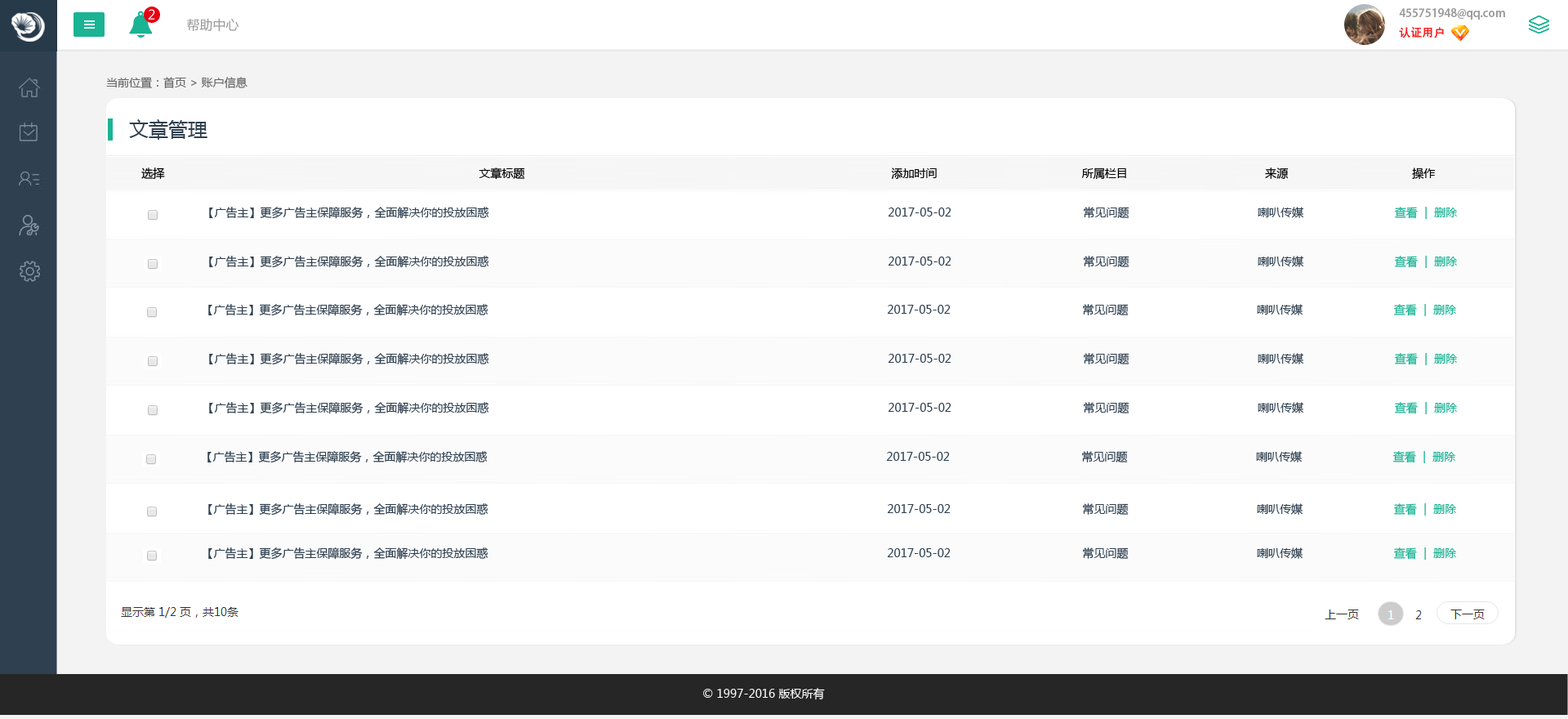
<style>
.page{position:relative;width:1568px;height:719px;background:#ffffff}
.page>*{position:absolute;margin:0}
.t1{font:13.1px "MicrosoftYaHei";color:#ffffff}
.t2{font:13.1px "MicrosoftYaHei";color:#999999}
.t3{font:11.4px/19.6px "AdobeHeitiStd-Regular";color:#999999}
.t4{font:11.4px/19.6px "AdobeHeitiStd-Regular";color:#f61e1e}
.t5{font:11.4px/19.6px "AdobeHeitiStd-Regular";color:#ffffff}
.t6{font:11.4px "MicrosoftYaHei";color:#666666}
.t7{font:19.6px "MicrosoftYaHei";color:#2f4050}
.t8{font:11.4px "MicrosoftYaHei";color:#000000}
.t9{font:11.4px "MicrosoftYaHei";color:#2f4050}
.t10{font:11.4px "MicrosoftYaHei";color:#1ab394}
.t11{font:11.4px "MicrosoftYaHei";color:#ffffff}
</style>
<div class="page">
<p class="t1" style="left:148px;top:9px;width:7px;height:11px">2</p>
<p class="t2" style="left:187px;top:18px;width:52px;height:14px">帮助中心</p>
<p class="t3" style="left:1399px;top:8px;width:106px;height:30px">455751948@qq.com<br><span class="t4">认证用户               </span><span class="t5">退出</span></p>
<p class="t6" style="left:106px;top:77px;width:141px;height:11px">当前位置：首页 &gt; 账户信息</p>
<p class="t7" style="left:129px;top:119px;width:78px;height:21px">文章管理</p>
<p class="t8" style="left:141px;top:167px;width:1295px;height:13px">选择                                                                                             文章标题                                                                                                      添加时间                                  所属栏目                               来源                                 操作</p>
<p class="t9" style="left:209px;top:207px;width:1249px;height:12px">【广告主】更多广告主保障服务，全面解决你的投放困惑                                                                                                                      2017-05-02                                       常见问题                                      喇叭传媒                           <span class="t10">查看  |  删除</span></p>
<p class="t9" style="left:209px;top:256px;width:1249px;height:12px">【广告主】更多广告主保障服务，全面解决你的投放困惑                                                                                                                      2017-05-02                                       常见问题                                      喇叭传媒                           <span class="t10">查看  |  删除</span></p>
<p class="t9" style="left:208px;top:304px;width:1249px;height:12px">【广告主】更多广告主保障服务，全面解决你的投放困惑                                                                                                                      2017-05-02                                       常见问题                                      喇叭传媒                           <span class="t10">查看  |  删除</span></p>
<p class="t9" style="left:209px;top:353px;width:1249px;height:12px">【广告主】更多广告主保障服务，全面解决你的投放困惑                                                                                                                      2017-05-02                                       常见问题                                      喇叭传媒                           <span class="t10">查看  |  删除</span></p>
<p class="t9" style="left:209px;top:402px;width:1249px;height:12px">【广告主】更多广告主保障服务，全面解决你的投放困惑                                                                                                                      2017-05-02                                       常见问题                                      喇叭传媒                           <span class="t10">查看  |  删除</span></p>
<p class="t9" style="left:207px;top:451px;width:1249px;height:12px">【广告主】更多广告主保障服务，全面解决你的投放困惑                                                                                                                      2017-05-02                                       常见问题                                      喇叭传媒                           <span class="t10">查看  |  删除</span></p>
<p class="t9" style="left:208px;top:503px;width:1249px;height:12px">【广告主】更多广告主保障服务，全面解决你的投放困惑                                                                                                                      2017-05-02                                       常见问题                                      喇叭传媒                           <span class="t10">查看  |  删除</span></p>
<p class="t9" style="left:208px;top:547px;width:1249px;height:12px">【广告主】更多广告主保障服务，全面解决你的投放困惑                                                                                                                      2017-05-02                                       常见问题                                      喇叭传媒                           <span class="t10">查看  |  删除</span></p>
<p class="t11" style="left:703px;top:688px;width:122px;height:12px">© 1997-2016 版权所有</p>
</div>
